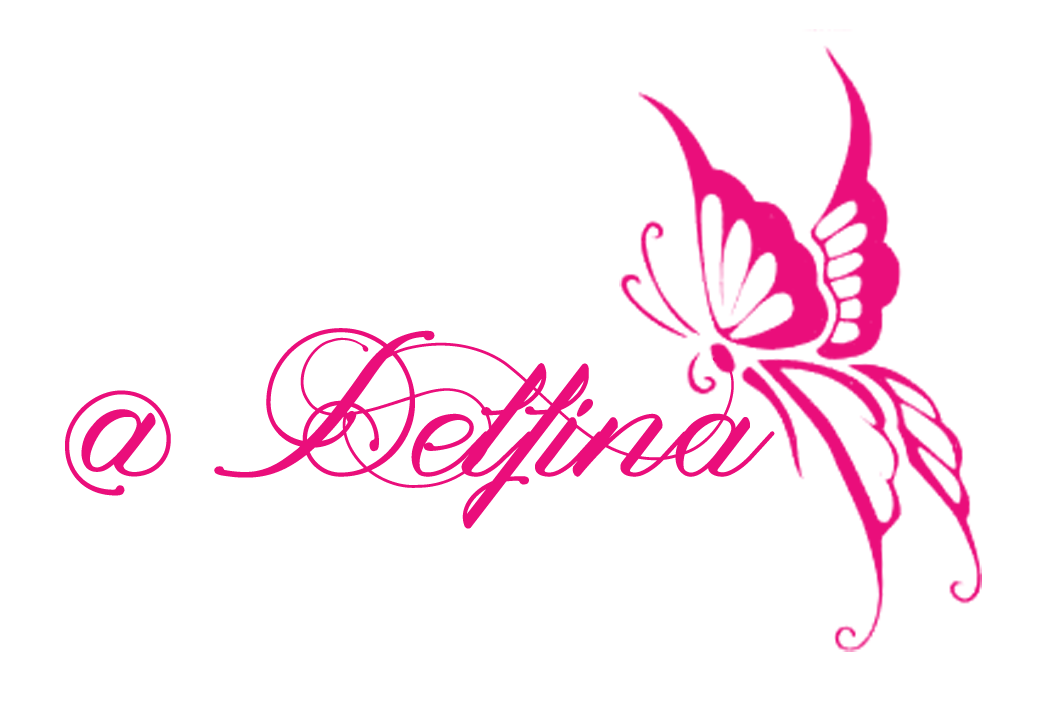
<style>
.page{position:relative;width:1063px;height:709px;background:#ffffff}
.page>*{position:absolute;margin:0}
.t1{font:184px "Magnolia-Italic";letter-spacing:-0.005em;color:#ea0e7b;font-weight:bold}
</style>
<div class="page">
<p class="t1" style="left:65px;top:328px;width:710px;height:201px">@Delfina</p>
</div>
